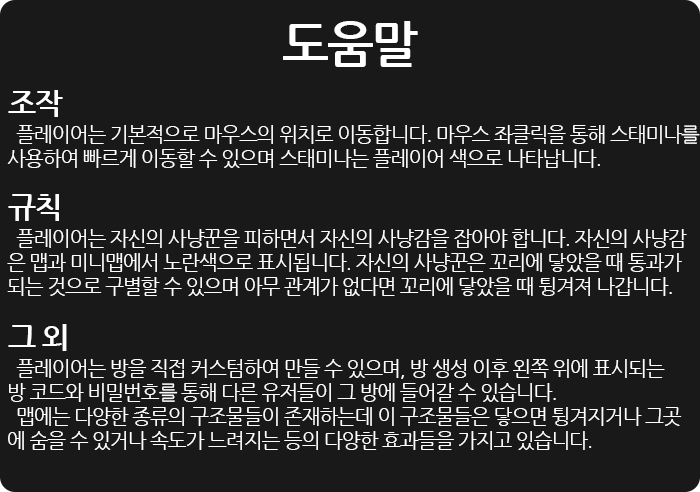
<style>
.page{position:relative;width:700px;height:492px;background:#191919}
.page>*{position:absolute;margin:0}
.t1{font:50px "NanumGothicBold";letter-spacing:-0.05em;color:#ffffff}
.t2{font:30px "NanumGothicBold";letter-spacing:-0.05em;color:#ffffff}
.t3{font:20px "NanumGothic";letter-spacing:-0.05em;color:#ffffff}
</style>
<div class="page">
<p class="t1" style="left:283px;top:21px;width:135px;height:46px">도움말</p>
<p class="t2" style="left:8px;top:90px;width:55px;height:27px">조작</p>
<p class="t3" style="left:7px;top:125px;width:693px;height:43px">플레이어는 기본적으로 마우스의 위치로 이동합니다. 마우스 좌클릭을 통해 스태미나를<br>사용하여 빠르게 이동할 수 있으며 스태미나는 플레이어 색으로 나타납니다.</p>
<p class="t2" style="left:8px;top:194px;width:51px;height:27px">규칙</p>
<p class="t3" style="left:7px;top:229px;width:680px;height:67px">플레이어는 자신의 사냥꾼을 피하면서 자신의 사냥감을 잡아야 합니다. 자신의 사냥감<br>은 맵과 미니맵에서 노란색으로 표시됩니다. 자신의 사냥꾼은 꼬리에 닿았을 때 통과가<br>되는 것으로 구별할 수 있으며 아무 관계가 없다면 꼬리에 닿았을 때 튕겨져 나갑니다.</p>
<p class="t2" style="left:8px;top:324px;width:59px;height:27px">그 외</p>
<p class="t3" style="left:8px;top:359px;width:674px;height:91px">플레이어는 방을 직접 커스텀하여 만들 수 있으며, 방 생성 이후 왼쪽 위에 표시되는<br>방 코드와 비밀번호를 통해 다른 유저들이 그 방에 들어갈 수 있습니다.<br>  맵에는 다양한 종류의 구조물들이 존재하는데 이 구조물들은 닿으면 튕겨지거나 그곳<br>에 숨을 수 있거나 속도가 느려지는 등의 다양한 효과들을 가지고 있습니다.</p>
</div>
